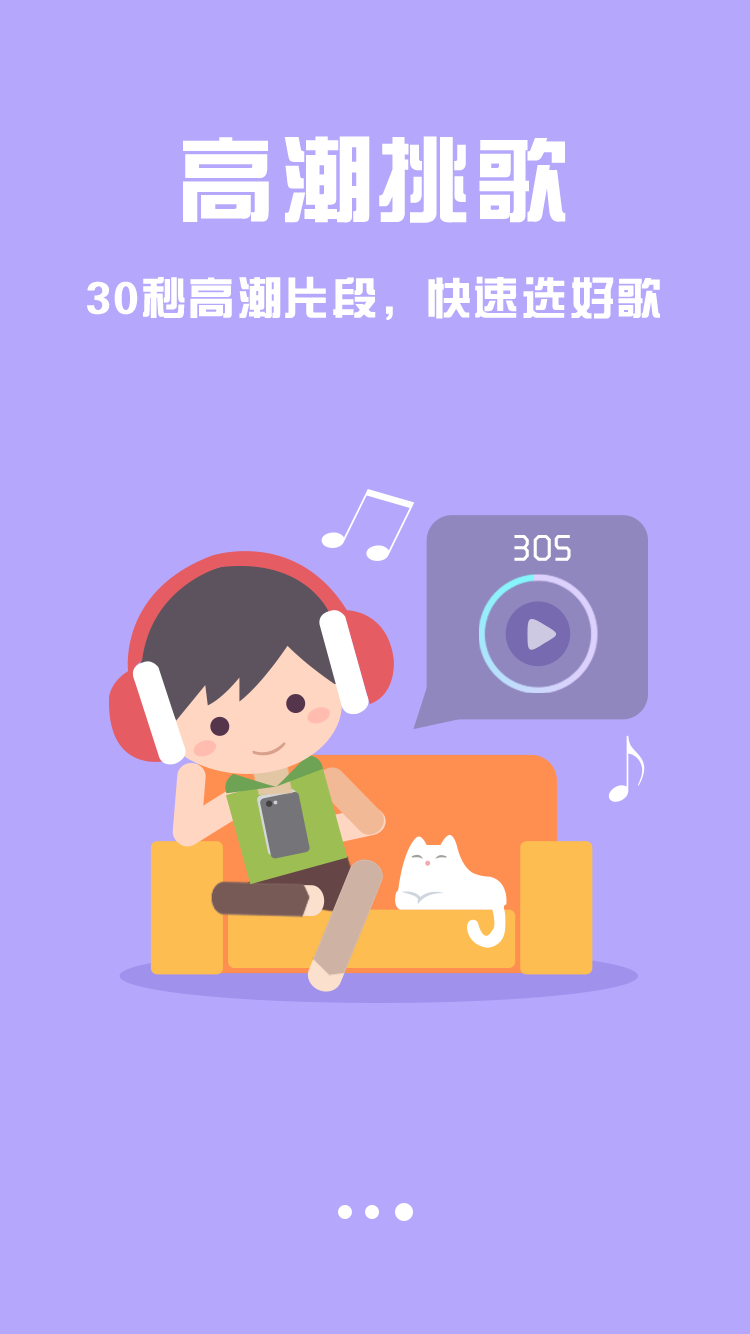
<style>
.page{position:relative;width:750px;height:1334px;background:#b5a7fc}
.page>*{position:absolute;margin:0}
.t1{font:96px "FZZYJW--GB1-0";letter-spacing:0.03em;color:#ffffff}
.t2{font:45.7px "FZZYJW--GB1-0";letter-spacing:0.03em;color:#ffffff}
.t3{font:37.5px "MFShangHei_Noncommercial-Regular";letter-spacing:0.03em;color:#ffffff}
</style>
<div class="page">
<p class="t1" style="left:183px;top:136px;width:383px;height:87px">高潮挑歌</p>
<p class="t2" style="left:87px;top:276px;width:573px;height:44px">30秒高潮片段，快速选好歌</p>
<p class="t3" style="left:514px;top:535px;width:57px;height:26px">30S</p>
</div>
